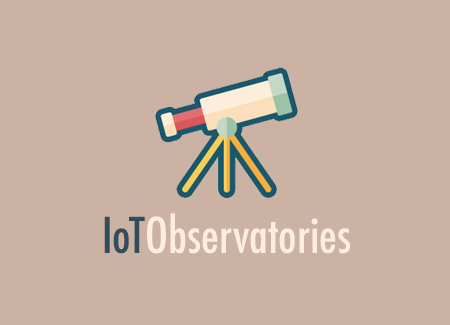
<style>
.page{position:relative;width:450px;height:325px;background:#ccb2a3}
.page>*{position:absolute;margin:0}
.t1{font:48px "Futura-CondensedMedium";color:#fdeedb}
.t2{font:48px "Futura-CondensedMedium";color:#334d5c}
</style>
<div class="page">
<p class="t1" style="left:104px;top:213px;width:246px;height:41px"><span class="t2">IoT</span>Observatories</p>
</div>
